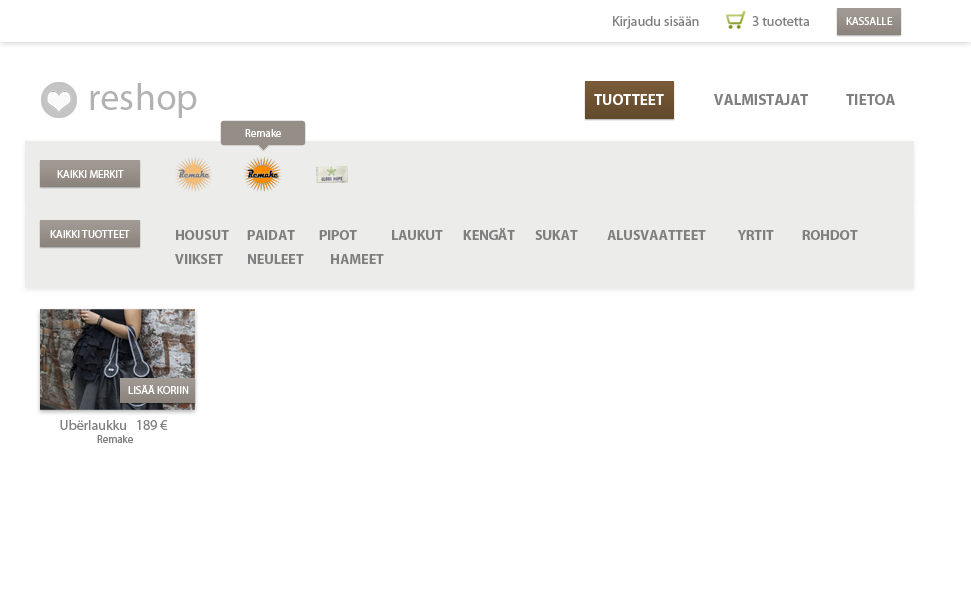
<style>
.page{position:relative;width:971px;height:599px;background:#ffffff}
.page>*{position:absolute;margin:0}
.t1{font:14px "MyriadPro-Regular";color:#7f7f7f}
.t2{font:11px "MyriadPro-Regular";color:#ffffff}
.t3{font:38px "MyriadPro-Regular";color:#b2b2b2}
.t4{font:15px "MyriadPro-Bold";color:#7f7f7f}
.t5{font:15px "MyriadPro-Bold";color:#ffffff}
.t6{font:14px/24px "MyriadPro-Bold";color:#7f7f7f}
.t7{font:11px "MyriadPro-Regular";color:#7f7f7f}
</style>
<div class="page">
<p class="t1" style="left:613px;top:16px;width:86px;height:13px">Kirjaudu sisään</p>
<p class="t1" style="left:752px;top:16px;width:57px;height:10px">3 tuotetta</p>
<p class="t2" style="left:846px;top:17px;width:47px;height:8px">KASSALLE</p>
<p class="t3" style="left:90px;top:83px;width:107px;height:35px">reshop</p>
<p class="t4" style="left:594px;top:94px;width:301px;height:11px"><span class="t5">TUOTTEET      </span>VALMISTAJAT     TIETOA</p>
<p class="t2" style="left:245px;top:129px;width:36px;height:8px">Remake</p>
<p class="t2" style="left:57px;top:170px;width:67px;height:8px">KAIKKI MERKIT</p>
<p class="t2" style="left:50px;top:230px;width:80px;height:8px">KAIKKI TUOTTEET</p>
<p class="t6" style="left:175px;top:228px;width:683px;height:36px">HOUSUT PAIDAT PIPOT LAUKUT KENGÄT SUKAT ALUSVAATTEET         YRTIT          ROHDOT<br>VIIKSET NEULEET     HAMEET</p>
<p class="t2" style="left:128px;top:385px;width:61px;height:9px">LISÄÄ KORIIN</p>
<p class="t1" style="left:60px;top:420px;width:108px;height:23px;text-align:center">Ubërlaukku   189 € <br><span class="t7">Remake</span></p>
</div>
